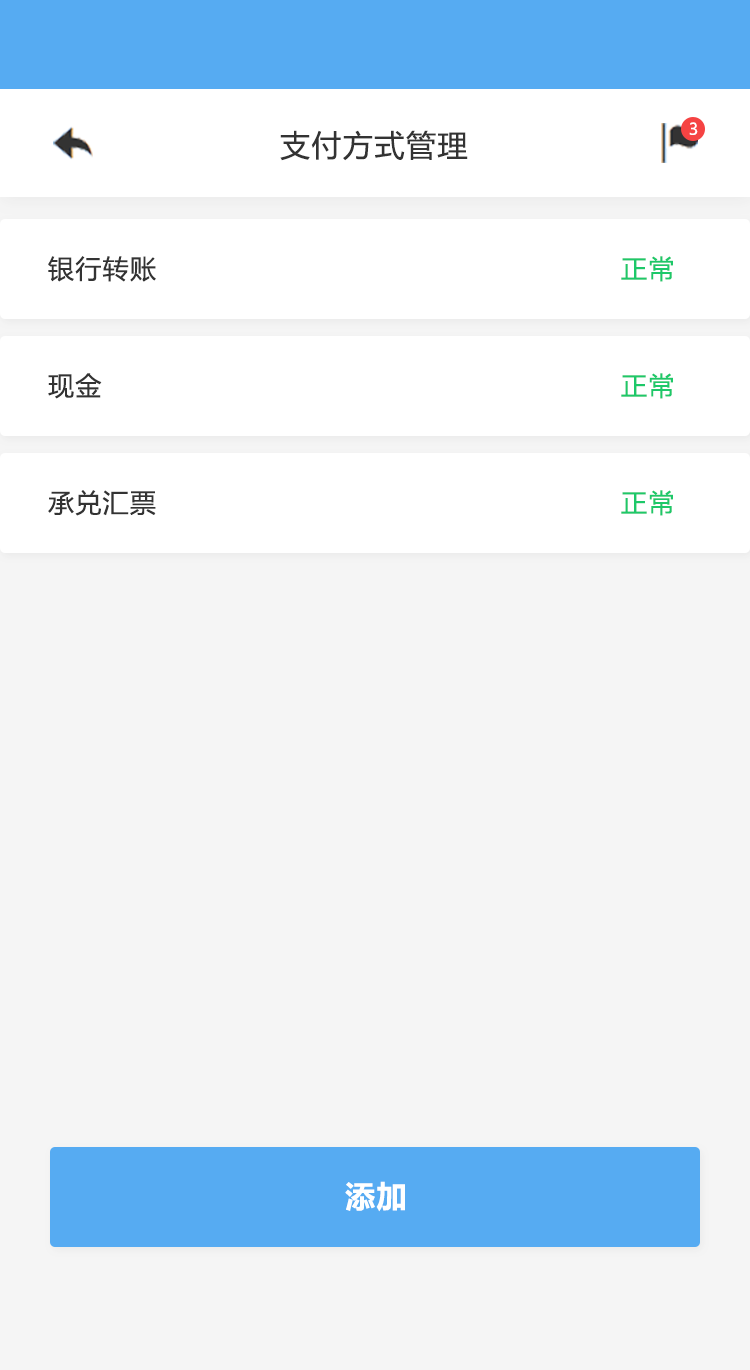
<style>
.page{position:relative;width:750px;height:1370px;background:#f5f5f5}
.page>*{position:absolute;margin:0}
.t1{font:16px "MicrosoftYaHeiUI";color:#ffffff}
.t2{font:30px "MicrosoftYaHeiUI";letter-spacing:0.05em;color:#333333}
.t3{font:26px "MicrosoftYaHeiUI";letter-spacing:0.05em;color:#333333}
.t4{font:26px "MicrosoftYaHeiUI";letter-spacing:0.05em;color:#1dc869}
.t5{font:30px "MicrosoftYaHeiUI-Bold";letter-spacing:0.05em;color:#ffffff}
</style>
<div class="page">
<p class="t1" style="left:689px;top:122px;width:9px;height:13px">3</p>
<p class="t2" style="left:280px;top:130px;width:188px;height:31px">支付方式管理</p>
<p class="t3" style="left:48px;top:256px;width:108px;height:26px">银行转账</p>
<p class="t4" style="left:621px;top:256px;width:52px;height:26px">正常</p>
<p class="t3" style="left:48px;top:373px;width:54px;height:26px">现金</p>
<p class="t4" style="left:621px;top:373px;width:52px;height:26px">正常</p>
<p class="t3" style="left:48px;top:490px;width:108px;height:26px">承兑汇票</p>
<p class="t4" style="left:621px;top:490px;width:52px;height:26px">正常</p>
<p class="t5" style="left:345px;top:1181px;width:60px;height:31px">添加</p>
</div>
